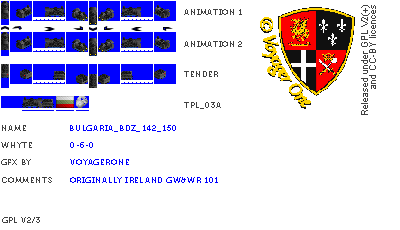
<style>
.page{position:relative;width:400px;height:230px;background:#ffffff}
.page>*{position:absolute;margin:0}
.t1{font:8px "Museo700-Regular";letter-spacing:0.075em;color:#404040;text-transform:uppercase}
.t2{font:8px "Museo700-Regular";letter-spacing:0.075em;color:#0000ff;text-transform:uppercase}
</style>
<div class="page">
<p class="t1" style="left:184px;top:9px;width:58px;height:6px">Animation 1</p>
<p class="t1" style="left:184px;top:41px;width:58px;height:6px">Animation 2</p>
<p class="t1" style="left:184px;top:71px;width:34px;height:6px">tender</p>
<p class="t1" style="left:184px;top:102px;width:37px;height:7px">tpl_03a</p>
<p class="t1" style="left:2px;top:125px;width:24px;height:6px">name</p>
<p class="t2" style="left:70px;top:125px;width:106px;height:7px">Bulgaria_BDZ_142_150</p>
<p class="t1" style="left:1px;top:142px;width:31px;height:6px">whyte</p>
<p class="t2" style="left:70px;top:142px;width:23px;height:6px">0-6-0</p>
<p class="t1" style="left:1px;top:159px;width:30px;height:6px">gfx by</p>
<p class="t2" style="left:70px;top:159px;width:59px;height:6px">voyagerone</p>
<p class="t1" style="left:2px;top:177px;width:50px;height:6px">comments</p>
<p class="t2" style="left:70px;top:177px;width:148px;height:6px">originally ireland gw&amp;wr 101</p>
<p class="t1" style="left:2px;top:217px;width:38px;height:6px">gpl v2/3</p>
</div>
